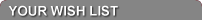
<style>
.page{position:relative;width:202px;height:20px;background:#858585}
.page>*{position:absolute;margin:0}
.t1{font:13.3px "Arial-BoldMT";color:#ffffff}
</style>
<div class="page">
<p class="t1" style="left:8px;top:5px;width:110px;height:11px">YOUR WISH LIST</p>
</div>
